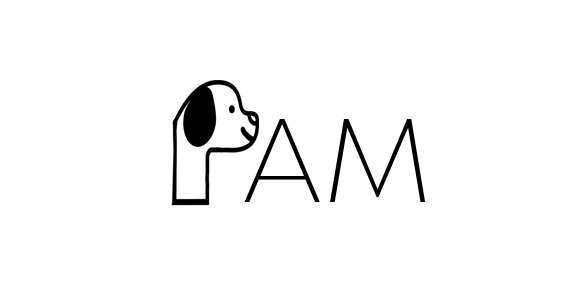
<style>
.page{position:relative;width:571px;height:286px;background:#ffffff}
.page>*{position:absolute;margin:0}
.t1{font:118.1px "Chopin-Light";color:#000000;scale:1.15 1}
</style>
<div class="page">
<p class="t1" style="left:244px;top:119px;width:182px;height:83px">AM</p>
</div>
